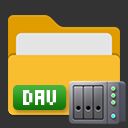
<style>
.page{position:relative;width:128px;height:128px;background:#333333}
.page>*{position:absolute;margin:0}
.t1{font:18px "Mini-Pixel";color:#ffffff}
</style>
<div class="page">
<p class="t1" style="left:23px;top:90px;width:33px;height:15px">DAV</p>
</div>
